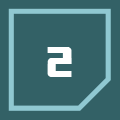
<style>
.page{position:relative;width:120px;height:120px;background:#336166}
.page>*{position:absolute;margin:0}
.t1{font:48px "TransformersMovie";color:#ffffff}
</style>
<div class="page">
<p class="t1" style="left:47px;top:47px;width:25px;height:30px">2</p>
</div>
